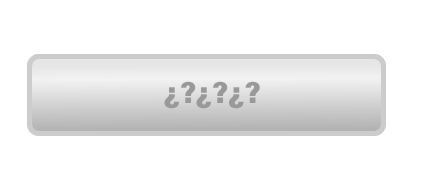
<style>
.page{position:relative;width:423px;height:191px;background:#ffffff}
.page>*{position:absolute;margin:0}
.t1{font:30px "AcuminPro-Black";color:#999999}
</style>
<div class="page">
<p class="t1" style="left:164px;top:81px;width:96px;height:28px">¿?¿?¿?</p>
</div>
